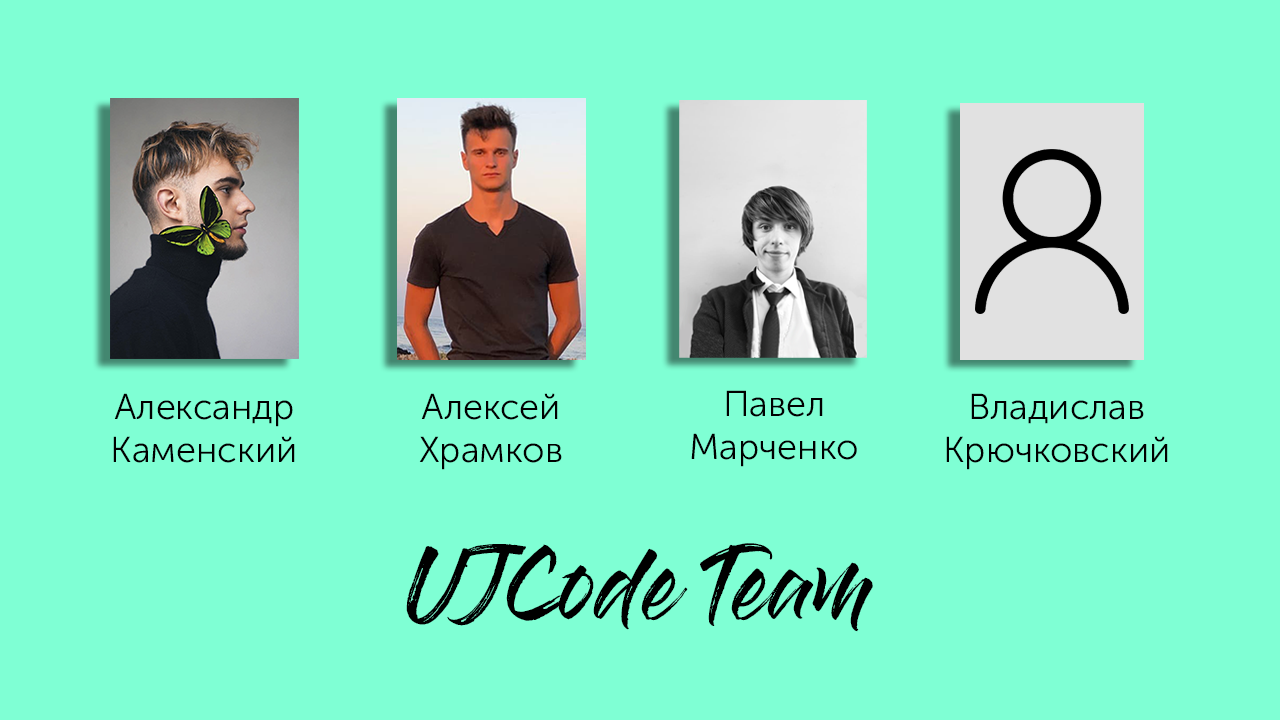
<style>
.page{position:relative;width:1280px;height:720px;background:#7fffd4}
.page>*{position:absolute;margin:0}
.t1{font:36px "MuseoSansCyrl-300";color:#000000}
.t2{font:72px "GlossAndBloom";color:#000000}
</style>
<div class="page">
<p class="t1" style="left:691px;top:390px;width:166px;height:77px;text-align:center">Павел<br>Марченко</p>
<p class="t1" style="left:113px;top:393px;width:182px;height:70px;text-align:center">Александр<br>Каменский</p>
<p class="t1" style="left:419px;top:393px;width:143px;height:77px;text-align:center">Алексей<br>Храмков</p>
<p class="t1" style="left:946px;top:393px;width:222px;height:77px;text-align:center">Владислав<br>Крючковский</p>
<p class="t2" style="left:406px;top:543px;width:467px;height:89px">UJCode Team</p>
</div>
